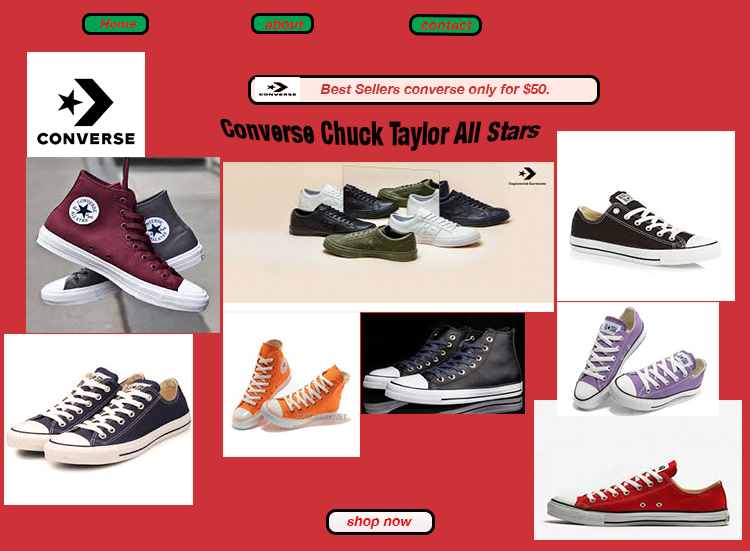
<style>
.page{position:relative;width:750px;height:551px;background:#cc3237}
.page>*{position:absolute;margin:0}
.t1{font:11.8px "HelveticaNeue-BoldItalic";color:#e01616;scale:1.11 1}
.t2{font:14px "HelveticaNeue-BoldItalic";color:#e01616}
.t3{font:14px "HelveticaNeue-BoldItalic";color:#cc3333}
.t4{font:24px "HelveticaNeue-CondensedBlack";color:#060505}
</style>
<div class="page">
<p class="t1" style="left:100px;top:19px;width:37px;height:9px">Home</p>
<p class="t2" style="left:264px;top:19px;width:40px;height:11px;text-align:center">about<br><br><br>t</p>
<p class="t2" style="left:421px;top:21px;width:52px;height:9px">contact</p>
<p class="t3" style="left:320px;top:83px;width:229px;height:14px">Best Sellers converse only for $50.</p>
<p class="t4" style="left:220px;top:118px;width:321px;height:33px">Converse Chuck Taylor All Stars</p>
<p class="t2" style="left:347px;top:516px;width:66px;height:13px">shop now</p>
</div>
